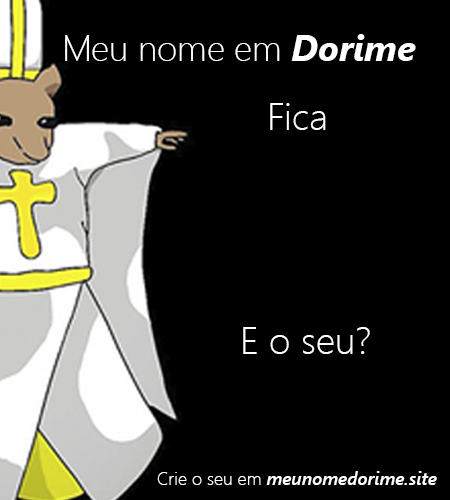
<style>
.page{position:relative;width:450px;height:500px;background:#000000}
.page>*{position:absolute;margin:0}
.t1{font:35.6px "SegoeUI-Light";color:#ffffff}
.t2{font:35.6px "SegoeUI-BoldItalic";color:#ffffff}
.t3{font:38px "SegoeUI-Light";color:#ffffff}
.t4{font:18px "SegoeUI-SemiboldItalic";color:#ffffff}
.t5{font:18px "SegoeUI-Light";color:#ffffff}
</style>
<div class="page">
<p class="t1" style="left:65px;top:34px;width:351px;height:27px">Meu nome em <span class="t2">Dorime</span></p>
<p class="t3" style="left:270px;top:103px;width:56px;height:27px">Fica</p>
<p class="t3" style="left:243px;top:327px;width:127px;height:27px">E o seu?</p>
<p class="t4" style="left:157px;top:471px;width:280px;height:14px"><span class="t5">Crie o seu em </span>meunomedorime.site</p>
</div>
